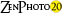
<style>
.page{position:relative;width:62px;height:13px;background:#ffffff}
.page>*{position:absolute;margin:0}
.t1{font:12px "TrajanPro-Regular";color:#010101}
.t2{font:8px "TrajanPro-Regular";color:#000000}
.t3{font:16px "TrajanPro-Regular";color:#000000}
</style>
<div class="page">
<p class="t1" style="left:0px;top:1px;width:10px;height:12px">Z</p>
<p class="t2" style="left:8px;top:4px;width:11px;height:6px">en</p>
<p class="t3" style="left:18px;top:1px;width:8px;height:12px">P</p>
<p class="t2" style="left:26px;top:4px;width:24px;height:6px">hoto</p>
</div>
